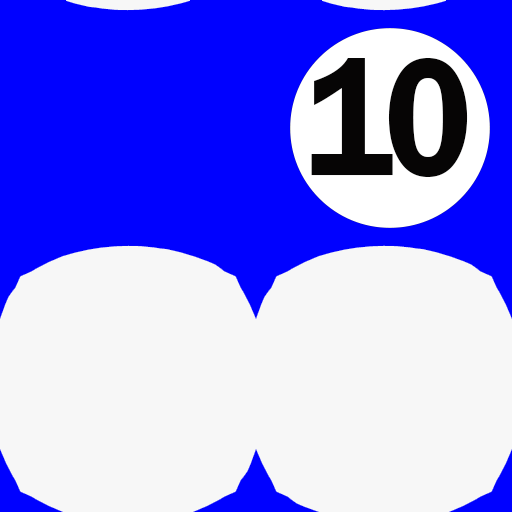
<style>
.page{position:relative;width:512px;height:512px;background:#f7f7f7}
.page>*{position:absolute;margin:0}
.t1{font:172.5px "FranklinGothic-Demi";letter-spacing:-0.05em;color:#060505;scale:0.87 1}
</style>
<div class="page">
<p class="t1" style="left:311px;top:58px;width:157px;height:119px">10</p>
</div>
